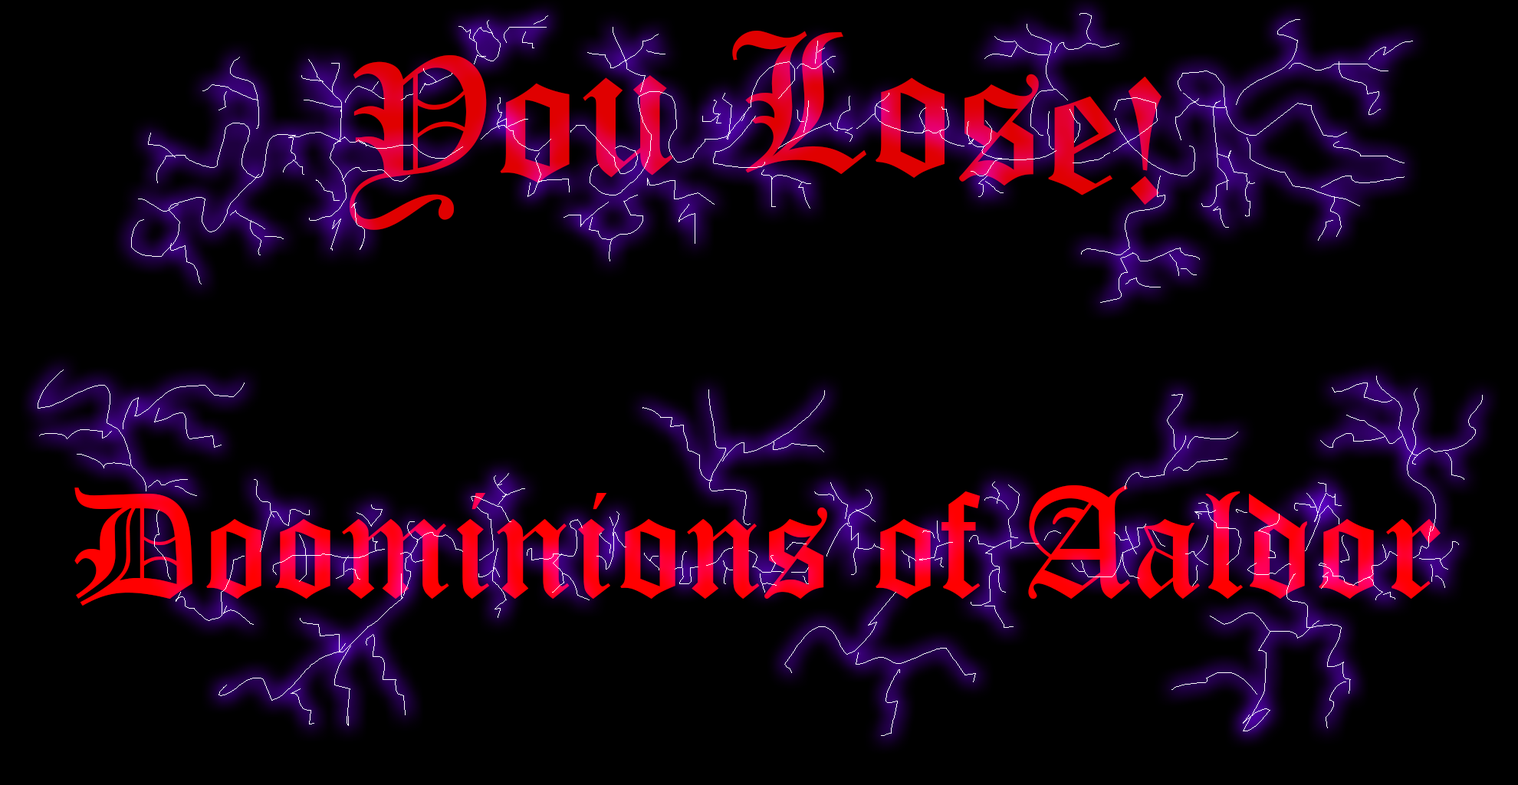
<style>
.page{position:relative;width:1518px;height:785px;background:#000000}
.page>*{position:absolute;margin:0}
.t1{font:191.7px "OldEnglishTextMT"}
.t2{font:153.4px "OldEnglishTextMT"}
</style>
<div class="page">
<p class="t1" style="left:349px;top:31px;width:813px;height:199px">You Lose!</p>
<p class="t2" style="left:74px;top:485px;width:1367px;height:121px">Doominions of Aaldor</p>
</div>
